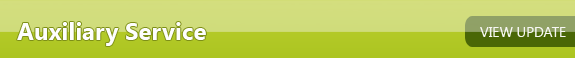
<style>
.page{position:relative;width:575px;height:58px}
.page>*{position:absolute;margin:0}
.t1{font:24px "SegoeUI-Bold";color:#fefefe}
.t2{font:14px "SegoeUI";color:#f6f7f1}
</style>
<div class="page">
<p class="t1" style="left:17px;top:22px;width:189px;height:24px">Auxiliary Service</p>
<p class="t2" style="left:480px;top:27px;width:86px;height:10px">VIEW UPDATE</p>
</div>
